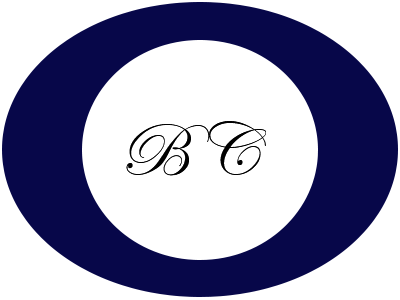
<style>
.page{position:relative;width:400px;height:300px;background:#ffffff}
.page>*{position:absolute;margin:0}
.t1{font:75px "EdwardianScriptITC";letter-spacing:0.1em;color:#010101}
</style>
<div class="page">
<p class="t1" style="left:126px;top:121px;width:140px;height:55px">BC</p>
</div>
